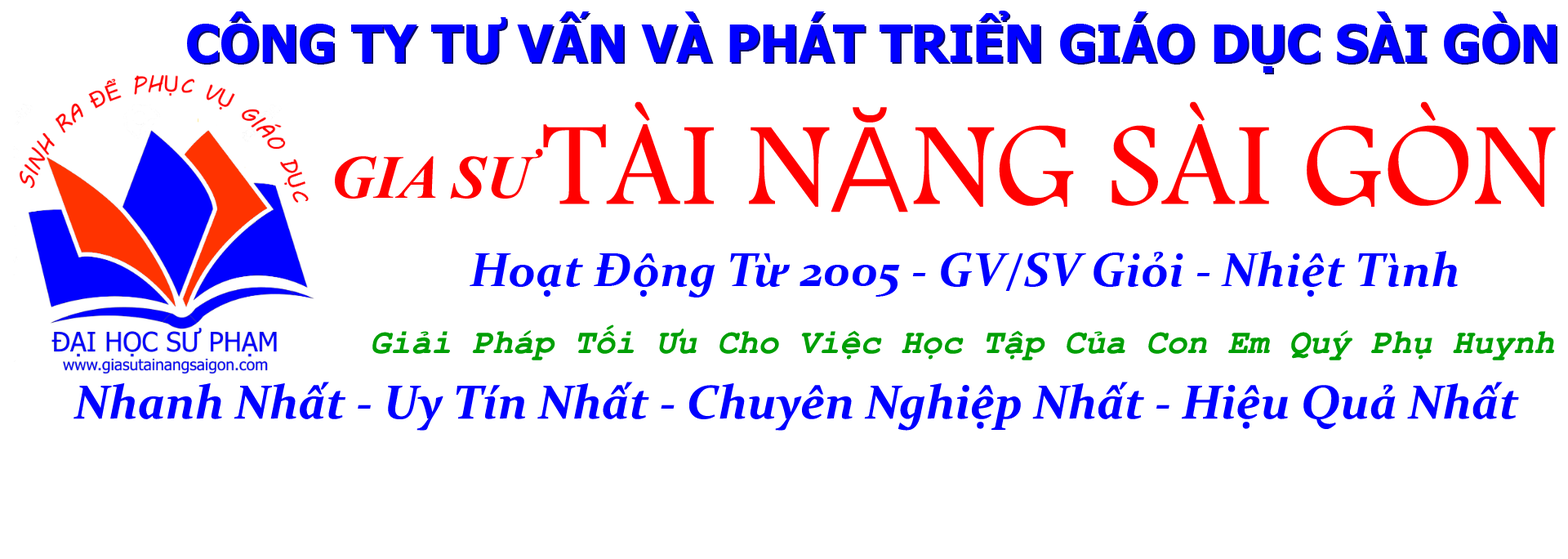
<style>
.page{position:relative;width:1568px;height:559px;background:#ffffff}
.page>*{position:absolute;margin:0}
.t1{font:51px "Tahoma-Bold";color:#0000ff}
.t2{font:122.5px "Andalus";color:#ff0000}
.t3{font:122.5px "Dotum";color:#ff0000}
.t4{font:61.2px "TimesNewRomanPS-BoldItalicMT";color:#ff0000}
.t5{font:47.6px "Constantia-BoldItalic";color:#0000ff}
.t6{font:34px "CourierNewPS-BoldItalicMT";color:#009f05}
</style>
<div class="page">
<p class="t1" style="left:187px;top:11px;width:1369px;height:62px">CÔNG TY TƯ VẤN VÀ PHÁT TRIỂN GIÁO DỤC SÀI GÒN</p>
<p class="t1" style="left:189px;top:12px;width:1368px;height:62px">CÔNG TY TƯ VẤN VÀ PHÁT TRIỂN GIÁO DỤC SÀI GÒN</p>
<p class="t2" style="left:543px;top:101px;width:1013px;height:111px">TÀI N<span class="t3">Ă</span>NG SÀI GÒN</p>
<p class="t4" style="left:335px;top:149px;width:208px;height:49px">GIA SƯ</p>
<p class="t5" style="left:470px;top:251px;width:988px;height:46px">Hoạt Động Từ 2005 - GV/SV Giỏi - Nhiệt Tình</p>
<p class="t6" style="left:372px;top:324px;width:1183px;height:36px">Giải Pháp Tối Ưu Cho Việc Học Tập Của Con Em Quý Phụ Huynh</p>
<p class="t5" style="left:74px;top:381px;width:1445px;height:49px">Nhanh Nhất - Uy Tín Nhất - Chuyên Nghiệp Nhất - Hiệu Quả Nhất</p>
</div>
